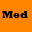
<style>
.page{position:relative;width:32px;height:32px;background:#ff8400}
.page>*{position:absolute;margin:0}
.t1{font:10px "Rockwell-ExtraBold";color:#000000}
</style>
<div class="page">
<p class="t1" style="left:2px;top:11px;width:26px;height:7px">Med</p>
</div>
